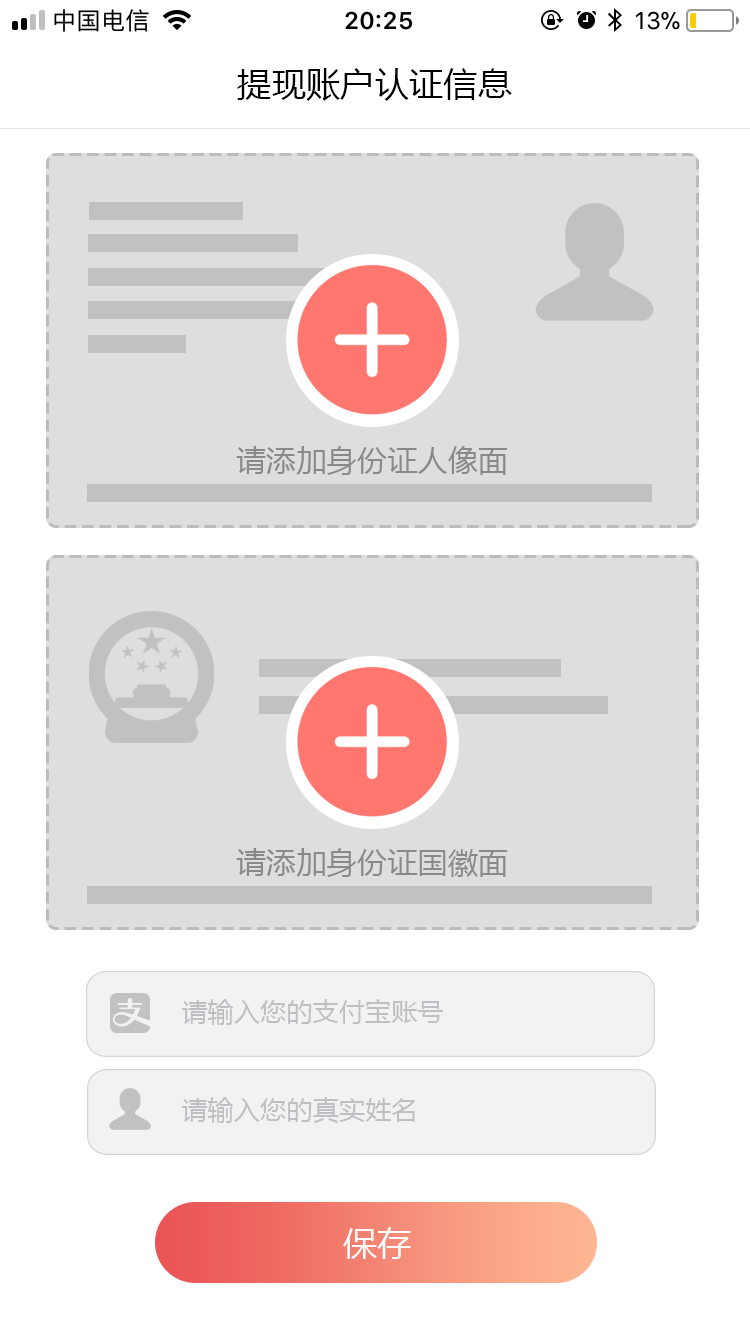
<style>
.page{position:relative;width:750px;height:1334px;background:#ffffff}
.page>*{position:absolute;margin:0}
.t1{font:34px "MicrosoftYaHei";letter-spacing:0.01em;color:#000000}
.t2{font:30px "MicrosoftYaHei";letter-spacing:0.01em;color:#898989}
.t3{font:26px "MicrosoftYaHei";letter-spacing:0.01em;color:#bfbec3}
.t4{font:34px "MicrosoftYaHei";letter-spacing:0.01em;color:#ffffff}
</style>
<div class="page">
<p class="t1" style="left:237px;top:68px;width:275px;height:33px">提现账户认证信息</p>
<p class="t2" style="left:236px;top:446px;width:271px;height:29px">请添加身份证人像面</p>
<p class="t2" style="left:236px;top:848px;width:271px;height:29px">请添加身份证国徽面</p>
<p class="t3" style="left:182px;top:999px;width:261px;height:26px">请输入您的支付宝账号</p>
<p class="t3" style="left:182px;top:1097px;width:233px;height:26px">请输入您的真实姓名</p>
<p class="t4" style="left:343px;top:1227px;width:68px;height:32px">保存</p>
</div>
